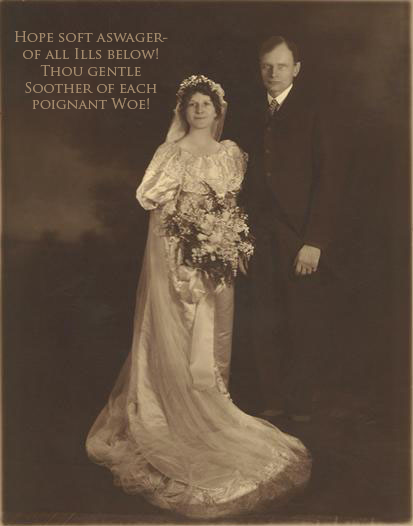
<style>
.page{position:relative;width:413px;height:526px}
.page>*{position:absolute;margin:0}
.t1{font:14px "TrajanPro-Regular";color:#a48b6d}
</style>
<div class="page">
<p class="t1" style="left:14px;top:31px;width:154px;height:78px;text-align:center">Hope soft aswagerof all Ills below!<br>Thou gentle Soother of each poignant Woe!</p>
</div>
